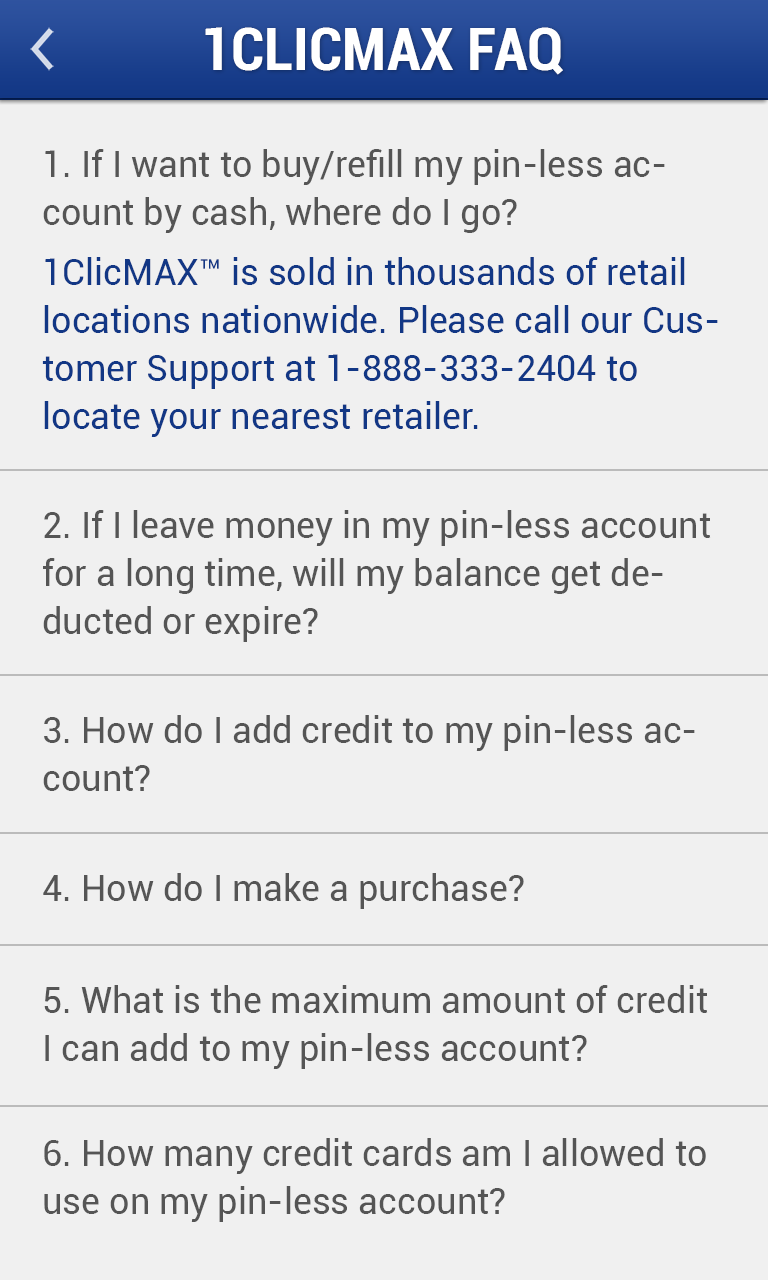
<style>
.page{position:relative;width:768px;height:1280px;background:#f0f0f0}
.page>*{position:absolute;margin:0}
.t1{font:60px "Roboto-BoldCondensed";color:#ffffff}
.t2{font:36px/48px "Roboto-Regular";color:#123785}
.t3{font:36px/48px "Roboto-Regular";color:#555555}
.t4{font:36px "Roboto-Regular";color:#555555}
</style>
<div class="page">
<p class="t1" style="left:205px;top:27px;width:358px;height:48px">1CLICMAX FAQ</p>
<p class="t2" style="left:42px;top:149px;width:676px;height:288px"><span class="t3">1. If I want to buy/refill my pin-less account by cash, where do I go?<br></span>1ClicMAX™ is sold in thousands of retail locations nationwide. Please call our Customer Support at 1-888-333-2404 to locate your nearest retailer.</p>
<p class="t3" style="left:43px;top:510px;width:668px;height:132px">2. If I leave money in my pin-less account for a long time, will my balance get deducted or expire?</p>
<p class="t3" style="left:43px;top:715px;width:652px;height:76px">3. How do I add credit to my pin-less account?</p>
<p class="t4" style="left:43px;top:873px;width:481px;height:36px">4. How do I make a purchase?</p>
<p class="t3" style="left:44px;top:985px;width:664px;height:84px">5. What is the maximum amount of credit I can add to my pin-less account?</p>
<p class="t3" style="left:44px;top:1138px;width:662px;height:84px">6. How many credit cards am I allowed to use on my pin-less account?</p>
</div>
